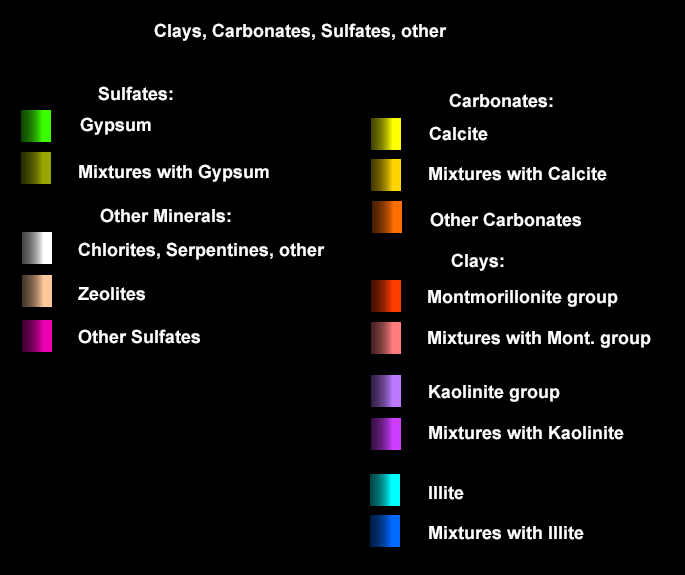
<style>
.page{position:relative;width:685px;height:575px;background:#000000}
.page>*{position:absolute;margin:0}
.t1{font:18px "Arial-BoldMT";color:#fffefe}
</style>
<div class="page">
<p class="t1" style="left:154px;top:23px;width:293px;height:18px">Clays, Carbonates, Sulfates, other</p>
<p class="t1" style="left:98px;top:86px;width:75px;height:15px">Sulfates:</p>
<p class="t1" style="left:449px;top:93px;width:104px;height:15px">Carbonates:</p>
<p class="t1" style="left:80px;top:117px;width:71px;height:18px">Gypsum</p>
<p class="t1" style="left:429px;top:126px;width:59px;height:15px">Calcite</p>
<p class="t1" style="left:79px;top:164px;width:190px;height:18px">Mixtures with Gypsum</p>
<p class="t1" style="left:429px;top:166px;width:178px;height:15px">Mixtures with Calcite</p>
<p class="t1" style="left:100px;top:208px;width:131px;height:15px">Other Minerals:</p>
<p class="t1" style="left:430px;top:212px;width:151px;height:15px">Other Carbonates</p>
<p class="t1" style="left:78px;top:242px;width:247px;height:18px">Chlorites, Serpentines, other</p>
<p class="t1" style="left:451px;top:253px;width:53px;height:18px">Clays:</p>
<p class="t1" style="left:78px;top:287px;width:67px;height:14px">Zeolites</p>
<p class="t1" style="left:428px;top:290px;width:190px;height:17px">Montmorillonite group</p>
<p class="t1" style="left:78px;top:329px;width:122px;height:15px">Other Sulfates</p>
<p class="t1" style="left:428px;top:331px;width:223px;height:17px">Mixtures with Mont. group</p>
<p class="t1" style="left:429px;top:385px;width:131px;height:17px">Kaolinite group</p>
<p class="t1" style="left:429px;top:426px;width:195px;height:14px">Mixtures with Kaolinite</p>
<p class="t1" style="left:429px;top:486px;width:35px;height:14px">Illite</p>
<p class="t1" style="left:429px;top:526px;width:155px;height:14px">Mixtures with Illite</p>
</div>
